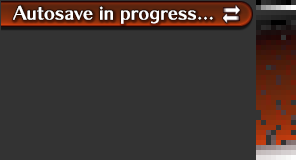
<style>
.page{position:relative;width:296px;height:160px;background:#333333}
.page>*{position:absolute;margin:0}
.t1{font:18px "ChiaroStd-B";letter-spacing:0.01em;color:#ffffff}
</style>
<div class="page">
<p class="t1" style="left:13px;top:5px;width:200px;height:19px">Autosave in progress...</p>
</div>
